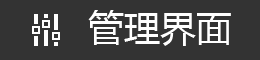
<style>
.page{position:relative;width:260px;height:60px;background:#333333}
.page>*{position:absolute;margin:0}
.t1{font:36px "MicrosoftYaHei";color:#ffffff}
</style>
<div class="page">
<p class="t1" style="left:88px;top:10px;width:143px;height:36px">管理界面</p>
</div>
